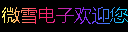
<style>
.page{position:relative;width:128px;height:32px;background:#000000}
.page>*{position:absolute;margin:0}
.t1{font:18px "MicrosoftYaHeiUI"}
</style>
<div class="page">
<p class="t1" style="left:2px;top:7px;width:126px;height:17px">微雪电子欢迎您</p>
</div>
